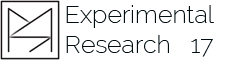
<style>
.page{position:relative;width:234px;height:60px;background:#ffffff}
.page>*{position:absolute;margin:0}
.t1{font:25px "Raleway-ExtraLight";color:#020d11}
</style>
<div class="page">
<p class="t1" style="left:66px;top:5px;width:148px;height:52px;text-align:justify">Experimental<br>Research   17</p>
</div>
